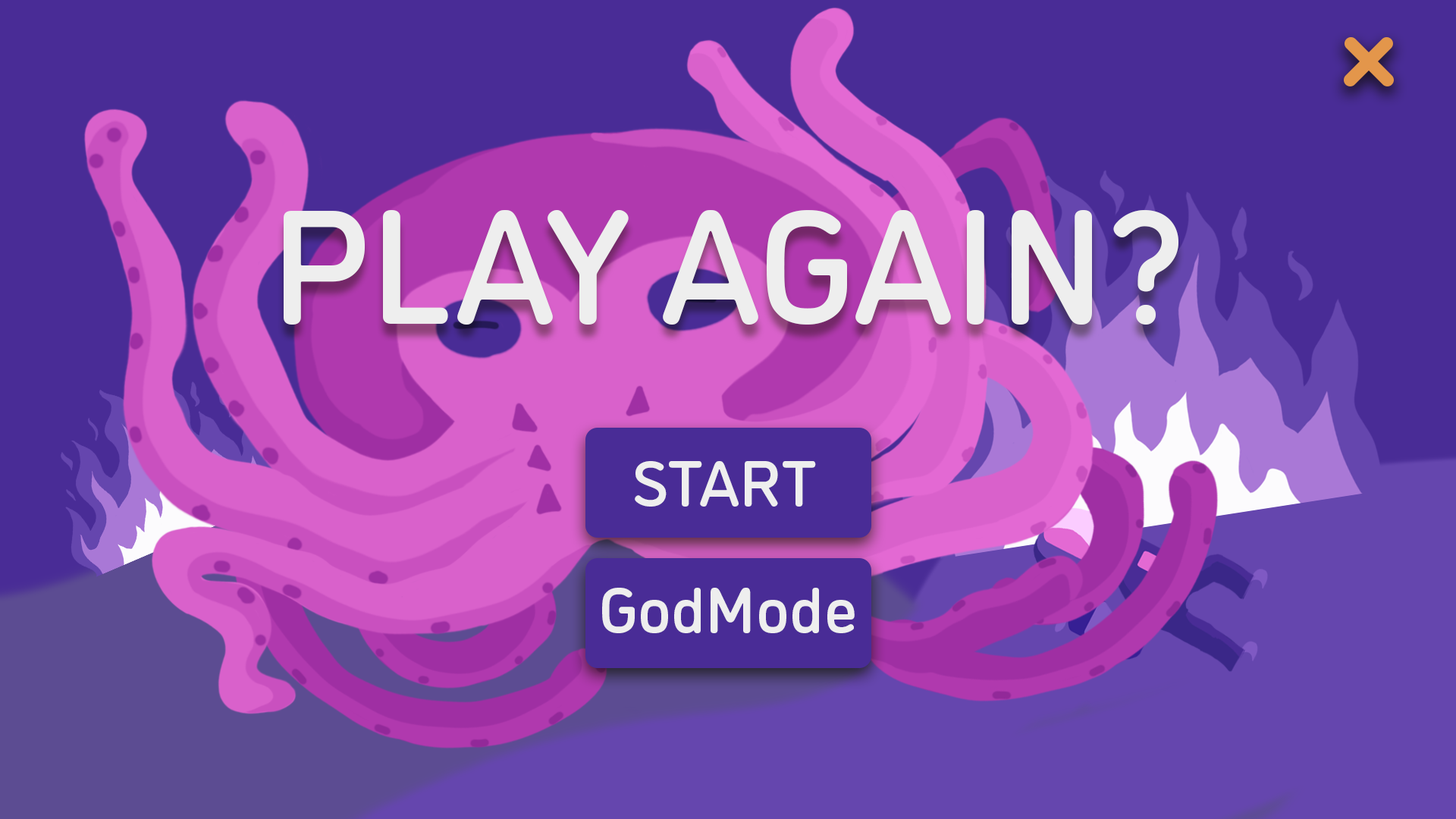
<style>
.page{position:relative;width:1456px;height:819px;background:#492c96}
.page>*{position:absolute;margin:0}
.t1{font:162px "DINosaur-Medium";color:#eeeeee}
.t2{font:65.4px "DINosaur-Medium";color:#eeeeee}
</style>
<div class="page">
<p class="t1" style="left:284px;top:210px;width:894px;height:115px">PLAY AGAIN?</p>
<p class="t2" style="left:635px;top:461px;width:181px;height:46px">START</p>
<p class="t2" style="left:602px;top:588px;width:253px;height:45px">GodMode</p>
</div>
